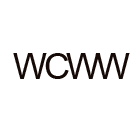
<style>
.page{position:relative;width:140px;height:140px;background:#ffffff}
.page>*{position:absolute;margin:0}
.t1{font:36px "ArialMT";letter-spacing:-0.1em;color:#150a06}
</style>
<div class="page">
<p class="t1" style="left:13px;top:53px;width:117px;height:26px">WCWW</p>
</div>
